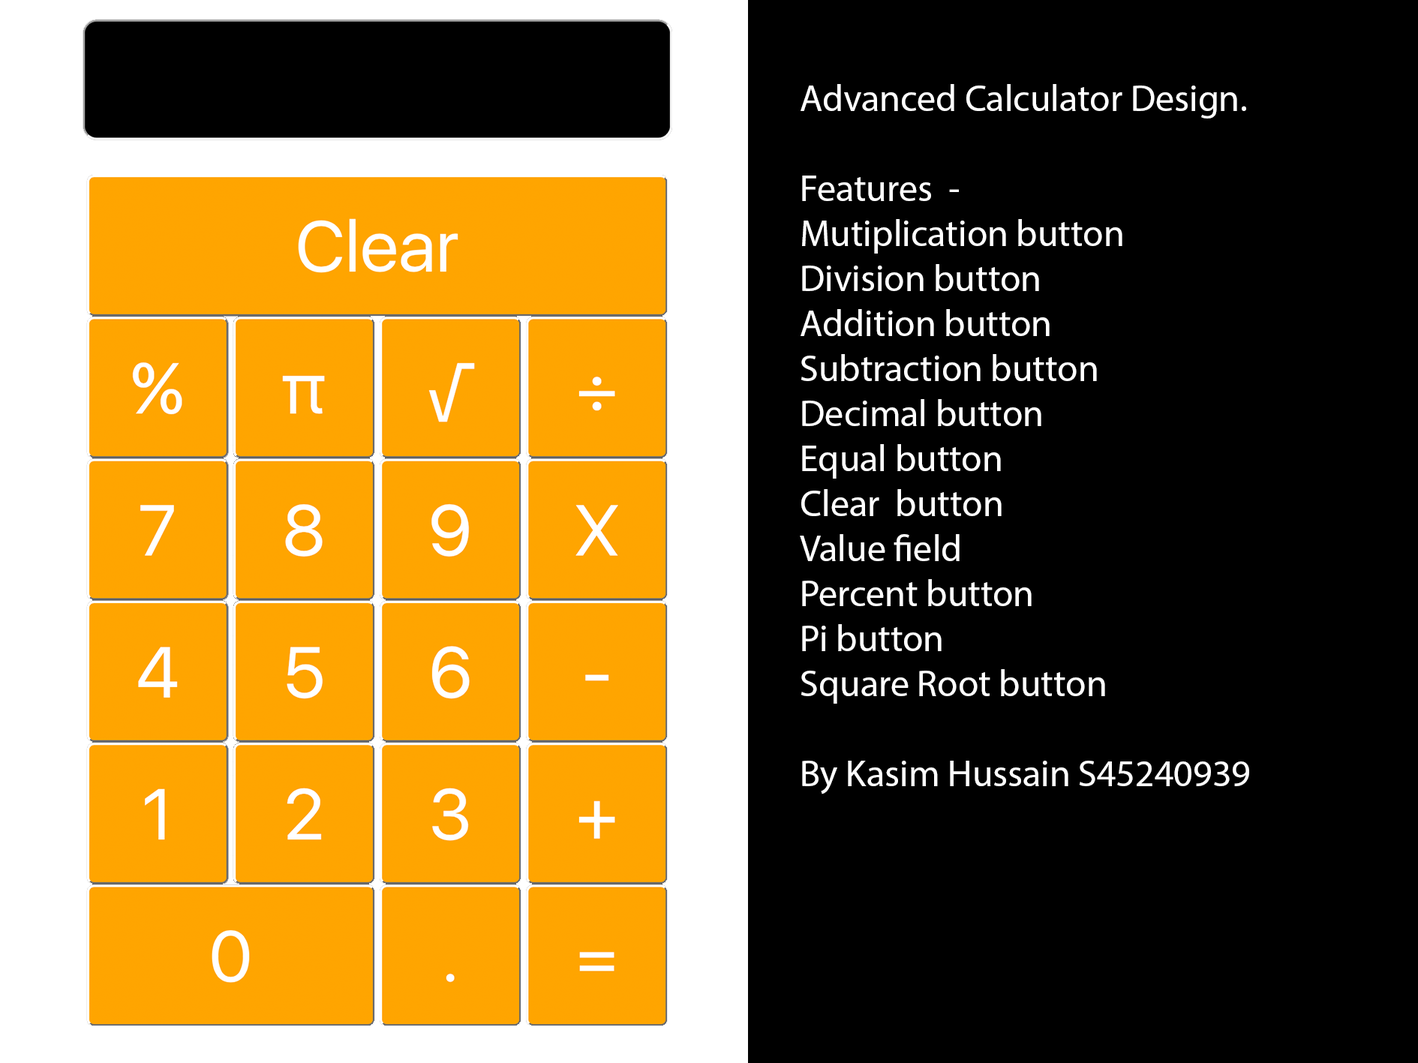
<style>
.page{position:relative;width:1418px;height:1063px;background:#000000}
.page>*{position:absolute;margin:0}
.t1{font:9px "MyriadPro-Regular";color:#ffffff}
</style>
<div class="page">
<p class="t1" style="left:800px;top:84px;width:449px;height:710px">Advanced Calculator Design.<br><br>Features  - <br>Mutiplication button<br>Division button<br>Addition button<br>Subtraction button<br>Decimal button<br>Equal button<br>Clear  button<br>Value field <br>Percent button<br>Pi button<br>Square Root button<br><br>By Kasim Hussain S45240939</p>
</div>
